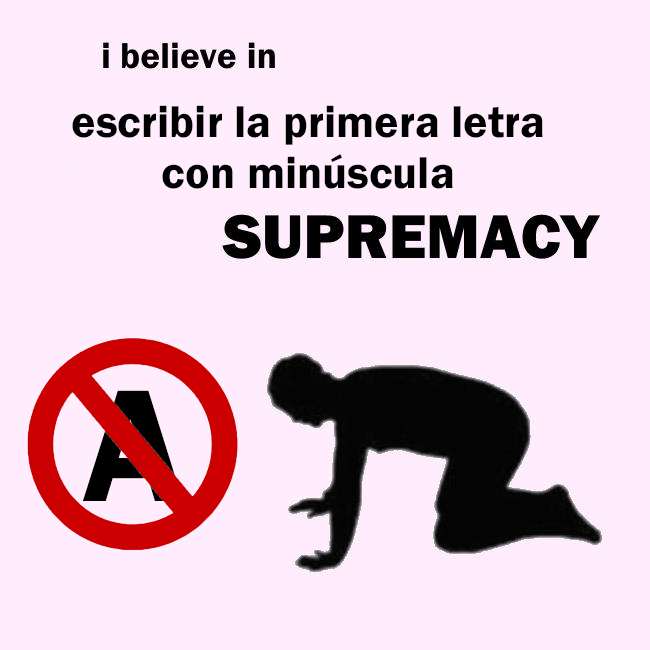
<style>
.page{position:relative;width:650px;height:650px;background:#ffedfd}
.page>*{position:absolute;margin:0}
.t1{font:46.1px "FranklinGothic-Demi";color:#000000}
.t2{font:165.1px "FranklinGothic-Demi"}
</style>
<div class="page">
<p class="t1" style="left:72px;top:105px;width:471px;height:84px;text-align:center">escribir la primera letra<br>con minúscula</p>
<p class="t2" style="left:83px;top:390px;width:100px;height:111px">A</p>
</div>
